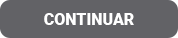
<style>
.page{position:relative;width:178px;height:38px;background:#626266}
.page>*{position:absolute;margin:0}
.t1{font:16px "Roboto-Black";color:#ffffff}
</style>
<div class="page">
<p class="t1" style="left:44px;top:13px;width:90px;height:12px">CONTINUAR</p>
</div>
